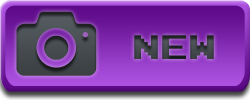
<style>
.page{position:relative;width:250px;height:100px}
.page>*{position:absolute;margin:0}
.t1{font:37px "Joystix";color:#3d4245}
</style>
<div class="page">
<p class="t1" style="left:134px;top:35px;width:80px;height:24px">NEW</p>
</div>
